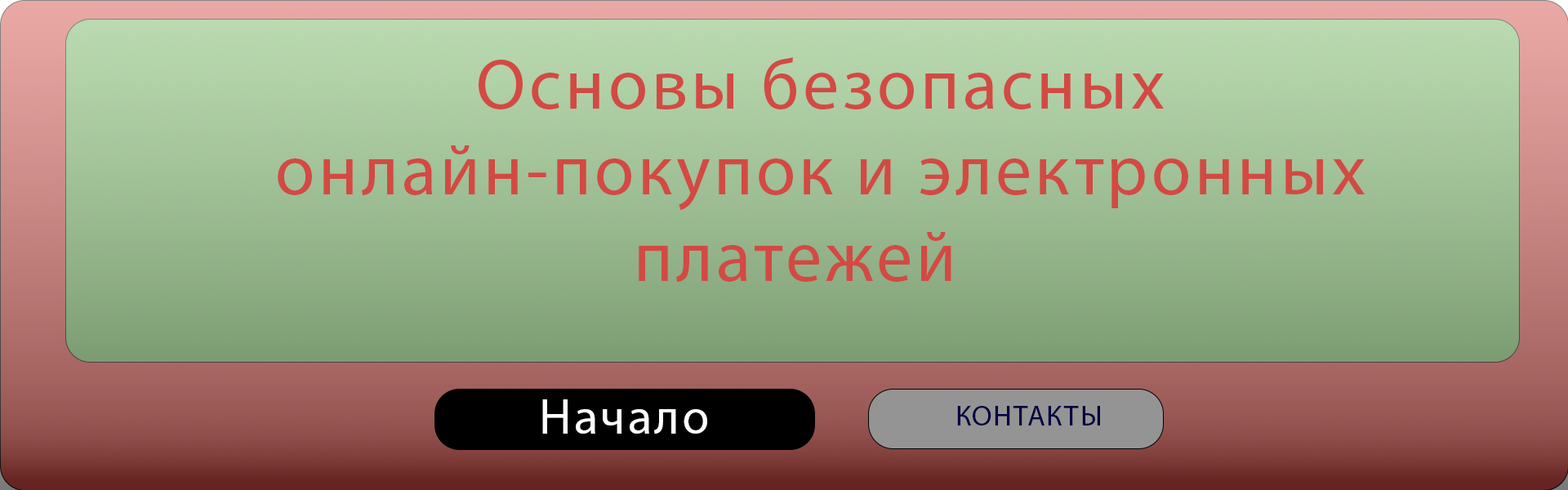
<style>
.page{position:relative;width:1568px;height:490px}
.page>*{position:absolute;margin:0}
.t1{font:71.9px "MyriadPro-Regular";letter-spacing:0.05em;color:#d24a43}
.t2{font:49.7px "MyriadPro-Regular";letter-spacing:0.05em;color:#ffffff}
.t3{font:29px "MyriadPro-Regular";letter-spacing:0.05em;color:#010041}
</style>
<div class="page">
<p class="t1" style="left:278px;top:57px;width:1087px;height:225px">Основы безопасных <br>         онлайн-покупок и электронных  <br>                            платежей</p>
<p class="t2" style="left:542px;top:399px;width:165px;height:35px">Начало</p>
<p class="t3" style="left:957px;top:406px;width:143px;height:19px">КОНТАКТЫ</p>
</div>
